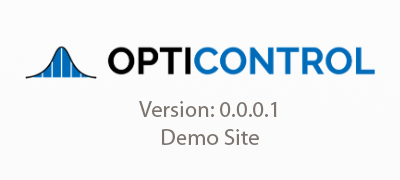
<style>
.page{position:relative;width:400px;height:180px;background:#fbfbfb}
.page>*{position:absolute;margin:0}
.t1{font:22.9px "MyriadPro-Regular";color:#7d756f}
</style>
<div class="page">
<p class="t1" style="left:139px;top:101px;width:138px;height:44px;text-align:center">Version: 0.0.0.1<br>Demo Site</p>
</div>
